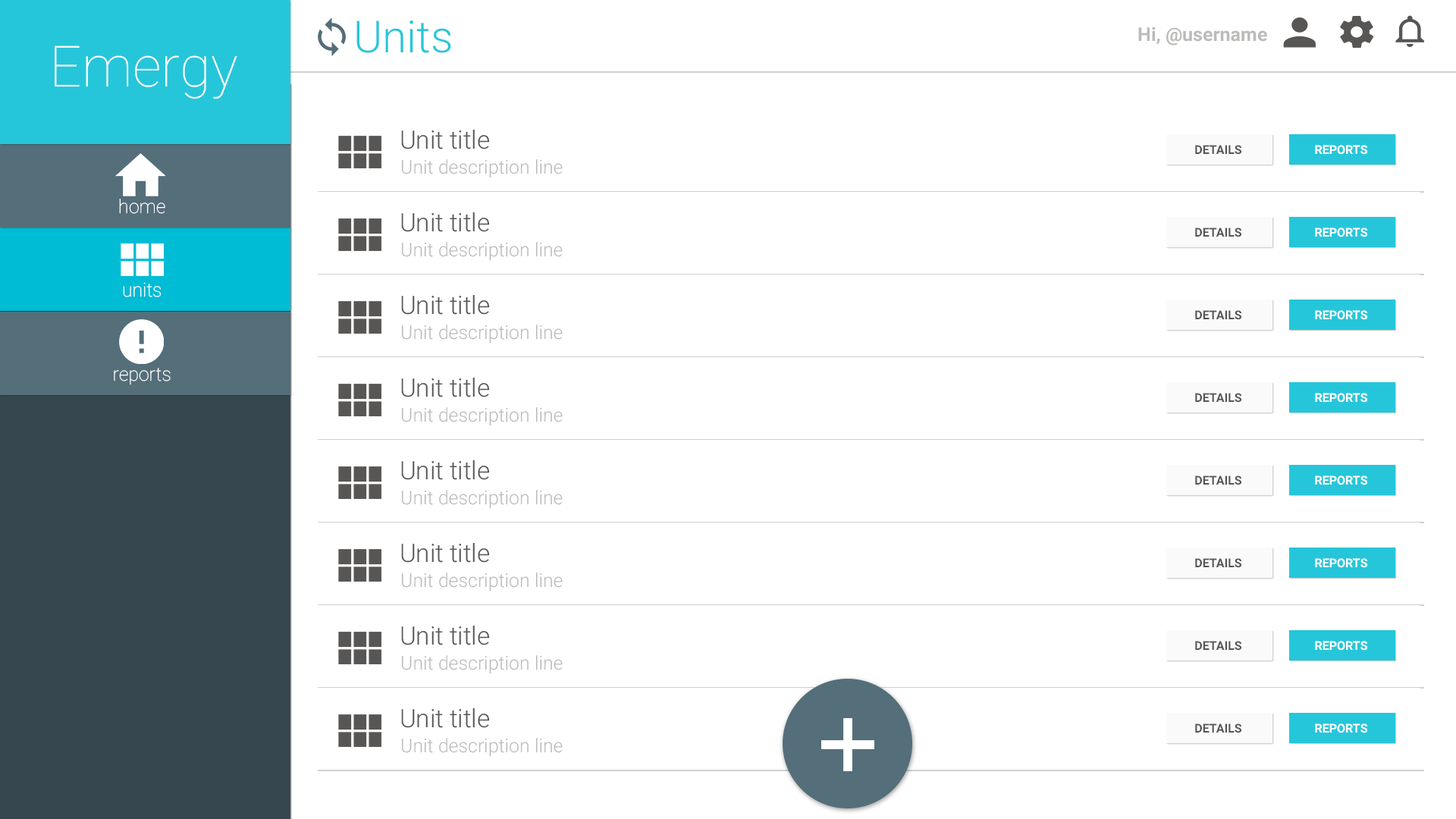
<style>
.page{position:relative;width:1456px;height:819px;background:#ffffff}
.page>*{position:absolute;margin:0}
.t1{font:44.2px "Roboto-Light";color:#26c6da}
.t2{font:19px "Roboto-Bold";color:#bcbbb9}
.t3{font:56.9px "Roboto-Thin";color:#ffffff}
.t4{font:25.3px "Roboto-Light";color:#575655}
.t5{font:12.1px "Roboto-Bold";color:#575655}
.t6{font:12.1px "Roboto-Bold";color:#ffffff}
.t7{font:19px "Roboto-Light";color:#bcbbb9}
.t8{font:19px "Roboto-Thin";color:#ffffff}
</style>
<div class="page">
<p class="t1" style="left:356px;top:20px;width:95px;height:33px">Units</p>
<p class="t2" style="left:1138px;top:27px;width:129px;height:18px">Hi, @username</p>
<p class="t3" style="left:55px;top:45px;width:182px;height:54px">Emergy</p>
<p class="t4" style="left:401px;top:129px;width:89px;height:20px">Unit title</p>
<p class="t5" style="left:1195px;top:145px;width:46px;height:10px">DETAILS</p>
<p class="t6" style="left:1315px;top:145px;width:52px;height:10px">REPORTS</p>
<p class="t7" style="left:401px;top:159px;width:162px;height:19px">Unit description line</p>
<p class="t8" style="left:119px;top:199px;width:46px;height:15px">home</p>
<p class="t4" style="left:401px;top:212px;width:89px;height:20px">Unit title</p>
<p class="t5" style="left:1195px;top:227px;width:46px;height:10px">DETAILS</p>
<p class="t6" style="left:1315px;top:227px;width:52px;height:10px">REPORTS</p>
<p class="t7" style="left:401px;top:242px;width:162px;height:19px">Unit description line</p>
<p class="t8" style="left:123px;top:282px;width:38px;height:15px">units</p>
<p class="t4" style="left:401px;top:294px;width:89px;height:21px">Unit title</p>
<p class="t5" style="left:1195px;top:310px;width:46px;height:10px">DETAILS</p>
<p class="t6" style="left:1315px;top:310px;width:52px;height:10px">REPORTS</p>
<p class="t7" style="left:401px;top:325px;width:162px;height:19px">Unit description line</p>
<p class="t8" style="left:114px;top:368px;width:57px;height:17px">reports</p>
<p class="t4" style="left:401px;top:377px;width:89px;height:20px">Unit title</p>
<p class="t5" style="left:1195px;top:393px;width:46px;height:10px">DETAILS</p>
<p class="t6" style="left:1315px;top:393px;width:52px;height:10px">REPORTS</p>
<p class="t7" style="left:401px;top:407px;width:162px;height:19px">Unit description line</p>
<p class="t4" style="left:401px;top:460px;width:89px;height:20px">Unit title</p>
<p class="t5" style="left:1195px;top:475px;width:46px;height:10px">DETAILS</p>
<p class="t6" style="left:1315px;top:475px;width:52px;height:10px">REPORTS</p>
<p class="t7" style="left:401px;top:490px;width:162px;height:19px">Unit description line</p>
<p class="t4" style="left:401px;top:542px;width:89px;height:21px">Unit title</p>
<p class="t5" style="left:1195px;top:558px;width:46px;height:10px">DETAILS</p>
<p class="t6" style="left:1315px;top:558px;width:52px;height:10px">REPORTS</p>
<p class="t7" style="left:401px;top:573px;width:162px;height:18px">Unit description line</p>
<p class="t4" style="left:401px;top:625px;width:89px;height:20px">Unit title</p>
<p class="t5" style="left:1195px;top:641px;width:46px;height:10px">DETAILS</p>
<p class="t6" style="left:1315px;top:641px;width:52px;height:10px">REPORTS</p>
<p class="t7" style="left:401px;top:655px;width:162px;height:19px">Unit description line</p>
<p class="t4" style="left:401px;top:708px;width:89px;height:20px">Unit title</p>
<p class="t5" style="left:1195px;top:723px;width:46px;height:10px">DETAILS</p>
<p class="t6" style="left:1315px;top:723px;width:52px;height:10px">REPORTS</p>
<p class="t7" style="left:401px;top:738px;width:162px;height:19px">Unit description line</p>
</div>
